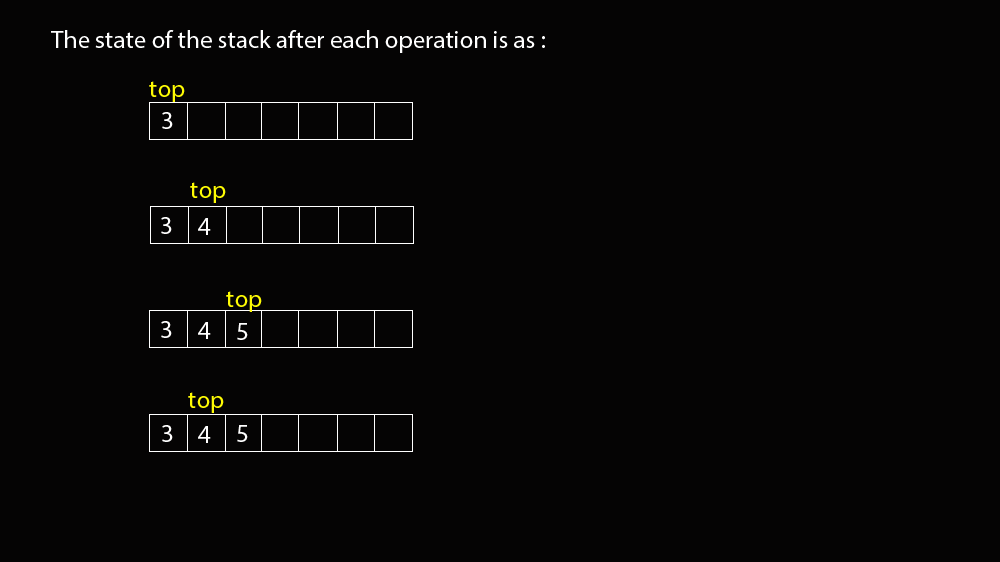
<style>
.page{position:relative;width:1000px;height:562px;background:#050404}
.page>*{position:absolute;margin:0}
.t1{font:25px "MyriadPro-Regular";color:#ffffff}
.t2{font:25px "MyriadPro-Regular";color:#fefb04}
</style>
<div class="page">
<p class="t1" style="left:51px;top:30px;width:494px;height:23px">The state of the stack after each operation is as :</p>
<p class="t2" style="left:149px;top:81px;width:36px;height:21px">top</p>
<p class="t1" style="left:162px;top:112px;width:11px;height:17px">3</p>
<p class="t2" style="left:190px;top:182px;width:36px;height:21px">top</p>
<p class="t1" style="left:161px;top:217px;width:11px;height:17px">3</p>
<p class="t1" style="left:198px;top:218px;width:13px;height:17px">4</p>
<p class="t2" style="left:226px;top:291px;width:36px;height:21px">top</p>
<p class="t1" style="left:161px;top:321px;width:11px;height:17px">3</p>
<p class="t1" style="left:198px;top:322px;width:13px;height:17px">4</p>
<p class="t1" style="left:237px;top:323px;width:11px;height:17px">5</p>
<p class="t2" style="left:188px;top:392px;width:36px;height:21px">top</p>
<p class="t1" style="left:162px;top:425px;width:11px;height:17px">3</p>
<p class="t1" style="left:237px;top:425px;width:11px;height:17px">5</p>
<p class="t1" style="left:198px;top:426px;width:13px;height:17px">4</p>
</div>
